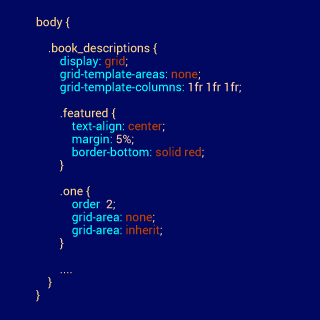
<style>
.page{position:relative;width:320px;height:320px;background:#000861}
.page>*{position:absolute;margin:0}
.t1{font:12px/13px "Roboto-Regular";color:#ffd586}
.t2{font:12px/13px "Roboto-Regular";color:#0013c3}
.t3{font:12px/13px "Roboto-Regular";color:#00ffff}
.t4{font:12px/13px "Roboto-Regular";color:#c34100}
.t5{font:12px/13px "Roboto-Regular";color:#ffcfa3}
</style>
<div class="page">
<p class="t1" style="left:36px;top:17px;width:205px;height:285px"><span class="t2"><br><br></span>body {<br><br>    .book_descriptions {<br>        <span class="t3">display: </span><span class="t4">grid</span><span class="t5">;<br>        </span><span class="t3">grid-template-areas: </span><span class="t4">none</span><span class="t5">;<br>        </span><span class="t3">grid-template-columns: </span><span class="t5">1fr 1fr 1fr;<br><br>        </span>.featured {<br>            <span class="t3">text-align: </span><span class="t4">center</span><span class="t5">;<br>            </span><span class="t3">margin: </span><span class="t5">5%;<br>            </span><span class="t3">border-bottom: </span><span class="t4">solid red</span><span class="t5">;<br>        </span>}    <br><br>        .one {<br>            <span class="t3">order</span><span class="t2">: </span><span class="t5">2;<br>            </span><span class="t3">grid-area: </span><span class="t4">none</span><span class="t5">;<br>            </span><span class="t3">grid-area: </span><span class="t4">inherit</span><span class="t5">;<br>        </span>}<br>        <br>        ....<br>    }<br>}</p>
</div>
